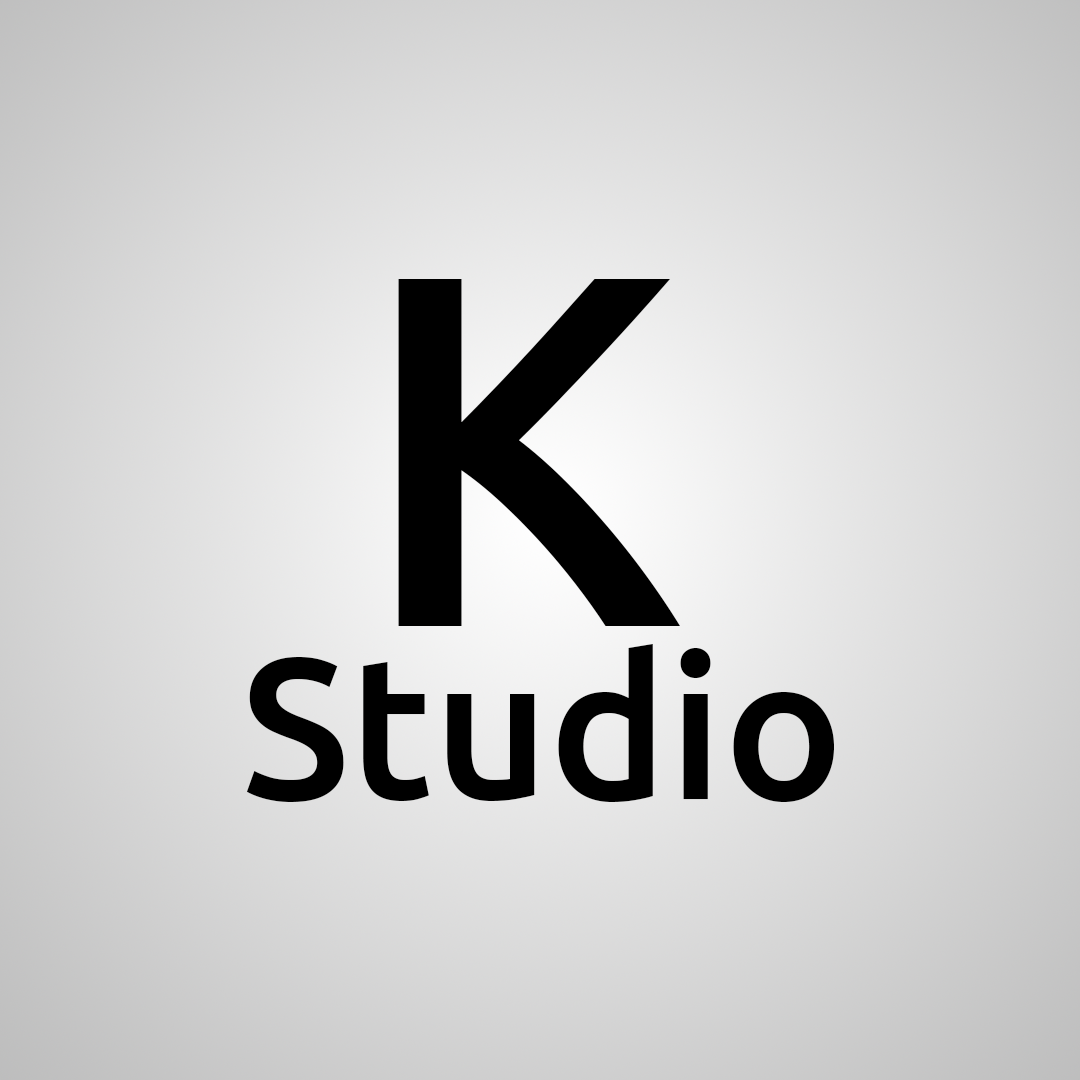
<style>
.page{position:relative;width:1080px;height:1080px}
.page>*{position:absolute;margin:0}
.t1{font:500px "Ubuntu-Medium";color:#000000}
.t2{font:200px "Ubuntu-Medium";color:#000000}
</style>
<div class="page">
<p class="t1" style="left:398px;top:279px;width:282px;height:347px">K</p>
<p class="t2" style="left:246px;top:644px;width:588px;height:158px">Studio</p>
</div>
